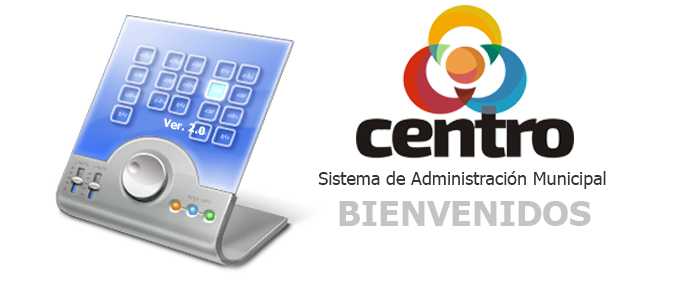
<style>
.page{position:relative;width:700px;height:300px;background:#ffffff}
.page>*{position:absolute;margin:0}
.t1{font:11px "Tahoma-Bold";color:#fefefe}
.t2{font:18px "Tahoma";color:#343434}
.t3{font:35px "Tahoma-Bold";color:#c4c4c4}
</style>
<div class="page">
<p class="t1" style="left:164px;top:118px;width:42px;height:18px;rotate:12deg">Ver. 2.0</p>
<p class="t2" style="left:318px;top:171px;width:288px;height:18px">Sistema de Administración Municipal</p>
<p class="t3" style="left:339px;top:201px;width:252px;height:25px">BIENVENIDOS</p>
</div>
